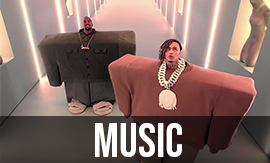
<style>
.page{position:relative;width:270px;height:163px}
.page>*{position:absolute;margin:0}
.t1{font:47.8px "BebasNeue-Regular";color:#ffffff}
</style>
<div class="page">
<p class="t1" style="left:95px;top:123px;width:87px;height:34px">Music</p>
</div>
